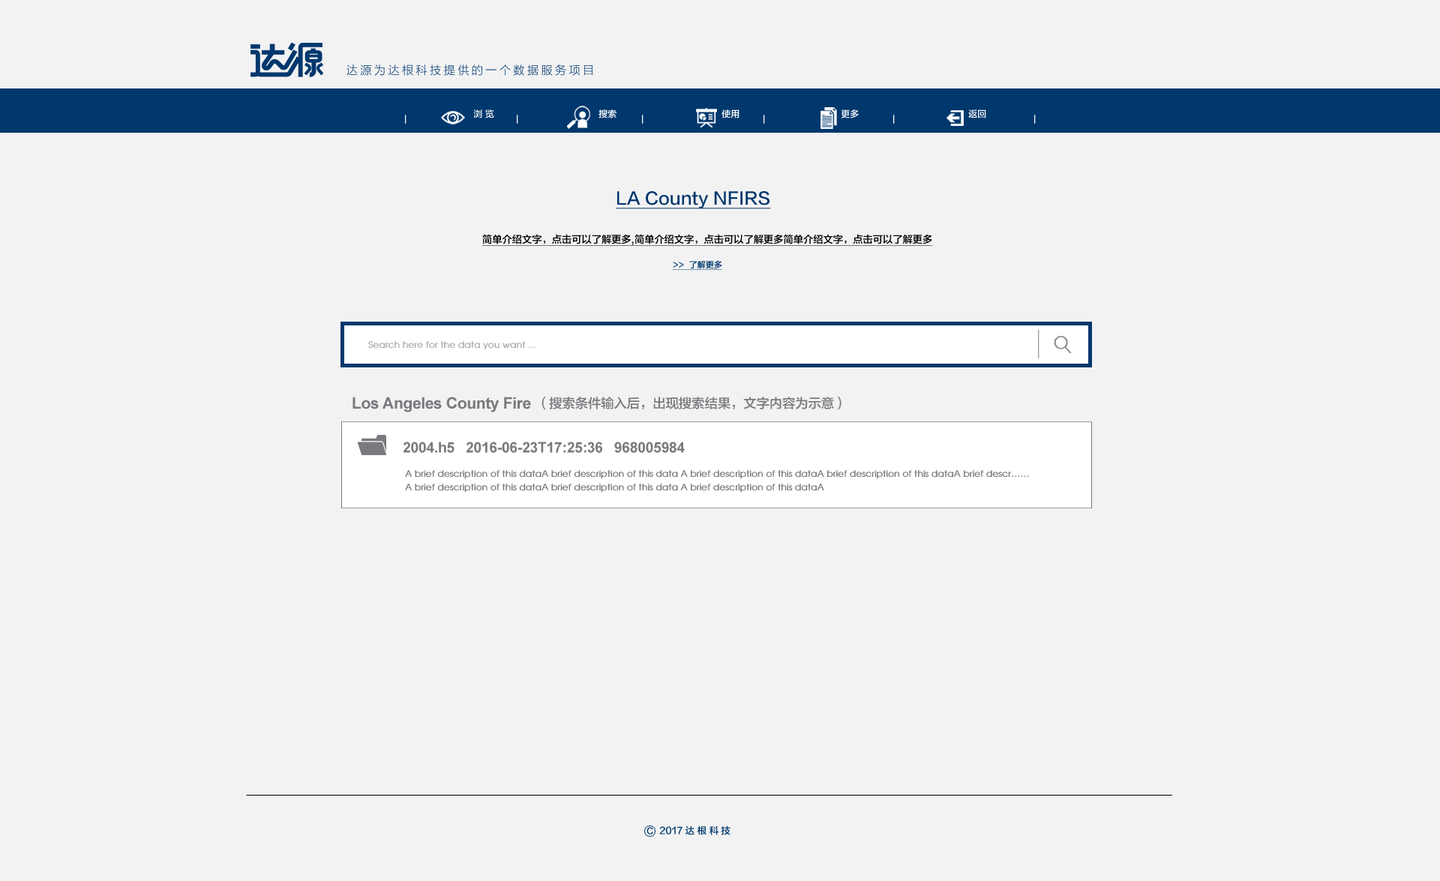
<style>
.page{position:relative;width:1440px;height:881px;background:#f2f2f3}
.page>*{position:absolute;margin:0}
.t1{font:11.4px "FZLTXHK--GBK1-0";letter-spacing:0.22em;color:#00376d}
.t2{font:9px "FZLTZHK--GBK1-0";color:#ffffff}
.t3{font:8.4px "FZLTZHK--GBK1-0";color:#ffffff}
.t4{font:16.7px "FZLTZHK--GBK1-0";color:#00376d;text-decoration:underline}
.t5{font:9.9px "FZLTZHK--GBK1-0";color:#000000;text-decoration:underline}
.t6{font:8.4px "FZLTZHK--GBK1-0";color:#00376d;text-decoration:underline}
.t7{font:9px "AvantGarde-Book-Bold";letter-spacing:-0.02em;color:#aeabab}
.t8{font:15.9px "Arial-BoldMT";letter-spacing:-0.02em;color:#7a7a7e}
.t9{font:13.2px "FZLTZHK--GBK1-0";letter-spacing:-0.02em;color:#7a7a7e}
.t10{font:14.7px "Arial-BoldMT";letter-spacing:-0.02em;color:#7a7a7e}
.t11{font:9px "AvantGarde-Book-Bold";letter-spacing:-0.02em;color:#7a7a7e}
.t12{font:8.4px "FZLTZHK--GBK1-0";letter-spacing:0.28em;color:#00376d}
.t13{font:9.3px "FZLTZHK--GBK1-0";color:#00376d}
.t14{font:9.3px "FZLTZHK--GBK1-0";letter-spacing:0.28em;color:#00376d}
</style>
<div class="page">
<p class="t1" style="left:346px;top:64px;width:246px;height:12px">达源为达根科技提供的一个数据服务项目</p>
<p class="t2" style="left:473px;top:109px;width:21px;height:9px">浏 览</p>
<p class="t2" style="left:598px;top:109px;width:18px;height:9px">搜索</p>
<p class="t2" style="left:721px;top:109px;width:18px;height:9px">使用</p>
<p class="t2" style="left:841px;top:109px;width:18px;height:9px">更多</p>
<p class="t2" style="left:968px;top:109px;width:18px;height:9px">返回</p>
<p class="t3" style="left:405px;top:115px;width:1px;height:9px">｜</p>
<p class="t3" style="left:517px;top:115px;width:1px;height:9px">｜</p>
<p class="t3" style="left:642px;top:115px;width:1px;height:9px">｜</p>
<p class="t3" style="left:763px;top:115px;width:2px;height:9px">｜</p>
<p class="t3" style="left:893px;top:115px;width:2px;height:9px">｜</p>
<p class="t3" style="left:1034px;top:115px;width:2px;height:9px">｜</p>
<p class="t4" style="left:616px;top:191px;width:155px;height:18px">LA County NFIRS</p>
<p class="t5" style="left:482px;top:234px;width:451px;height:12px">简单介绍文字，点击可以了解更多,简单介绍文字，点击可以了解更多简单介绍文字，点击可以了解更多</p>
<p class="t6" style="left:673px;top:260px;width:49px;height:10px">&gt;&gt;  了解更多</p>
<p class="t7" style="left:368px;top:341px;width:167px;height:9px">Search here for the data you want ...</p>
<p class="t8" style="left:352px;top:397px;width:179px;height:15px">Los Angeles County Fire</p>
<p class="t9" style="left:541px;top:397px;width:300px;height:13px">（搜索条件输入后，出现搜索结果，文字内容为示意）</p>
<p class="t10" style="left:403px;top:442px;width:282px;height:11px">2004.h5   2016-06-23T17:25:36   968005984</p>
<p class="t11" style="left:405px;top:470px;width:624px;height:9px">A brief description of this dataA brief description of this data A brief description of this dataA brief description of this dataA brief descr……</p>
<p class="t11" style="left:405px;top:484px;width:419px;height:9px">A brief description of this dataA brief description of this data A brief description of this dataA</p>
<p class="t12" style="left:646px;top:827px;width:7px;height:8px">C</p>
<p class="t13" style="left:659px;top:826px;width:71px;height:9px">2017 <span class="t14">达根科技</span></p>
</div>
